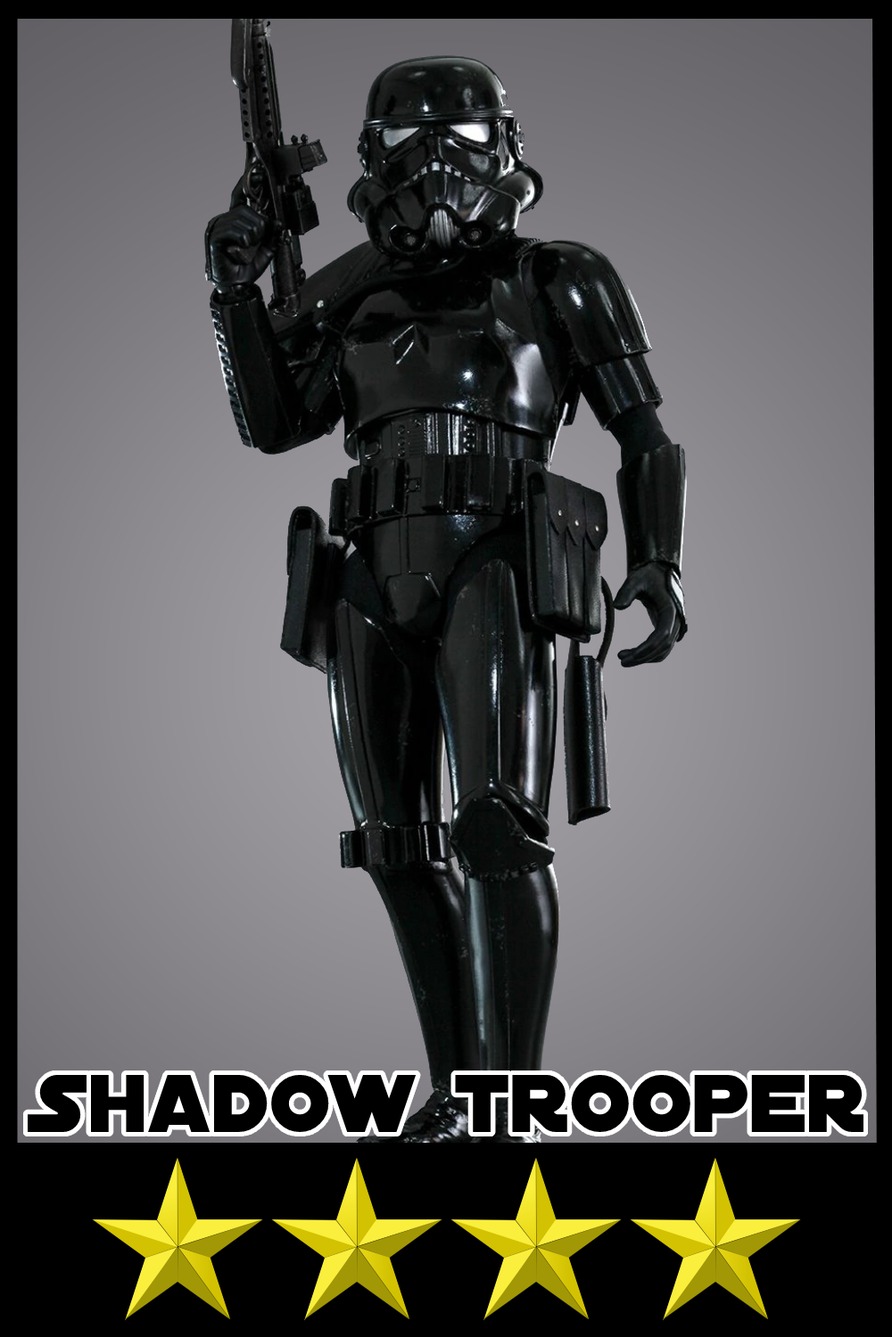
<style>
.page{position:relative;width:892px;height:1337px}
.page>*{position:absolute;margin:0}
.t1{font:87.9px "DistantGalaxy";color:#000000}
</style>
<div class="page">
<p class="t1" style="left:28px;top:1075px;width:835px;height:57px">Shadow trooper</p>
</div>
